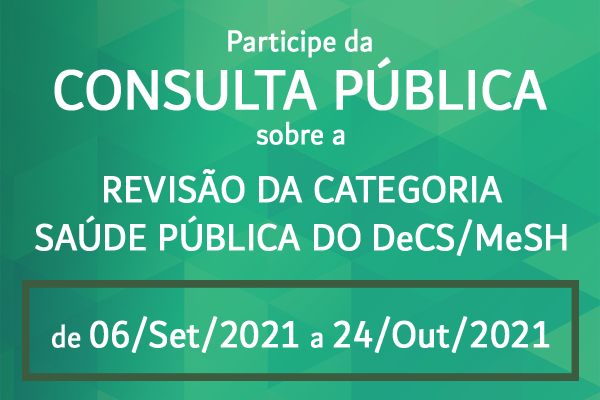
<style>
.page{position:relative;width:600px;height:400px}
.page>*{position:absolute;margin:0}
.t1{font:32px "Dubai-Regular";color:#ffffff;font-weight:bold;scale:0.9 1}
.t2{font:60px "Dubai-Regular";color:#ffffff;font-weight:bold;scale:0.9 1}
.t3{font:40px "Dubai-Regular";color:#ffffff;font-weight:bold;scale:0.9 1}
.t4{font:32.6px "Dubai-Regular";color:#ffffff;font-weight:bold;scale:0.9 1}
</style>
<div class="page">
<p class="t1" style="left:228px;top:28px;width:144px;height:30px">Participe da</p>
<p class="t2" style="left:54px;top:57px;width:493px;height:54px">CONSULTA PÚBLICA</p>
<p class="t1" style="left:256px;top:121px;width:89px;height:24px">sobre a</p>
<p class="t3" style="left:35px;top:169px;width:532px;height:87px;text-align:center">REVISÃO DA CATEGORIA<br>SAÚDE PÚBLICA DO DeCS/MeSH</p>
<p class="t3" style="left:52px;top:316px;width:498px;height:37px"><span class="t4">de </span>06/Set/2021 <span class="t4">a </span>24/Out/2021</p>
</div>
